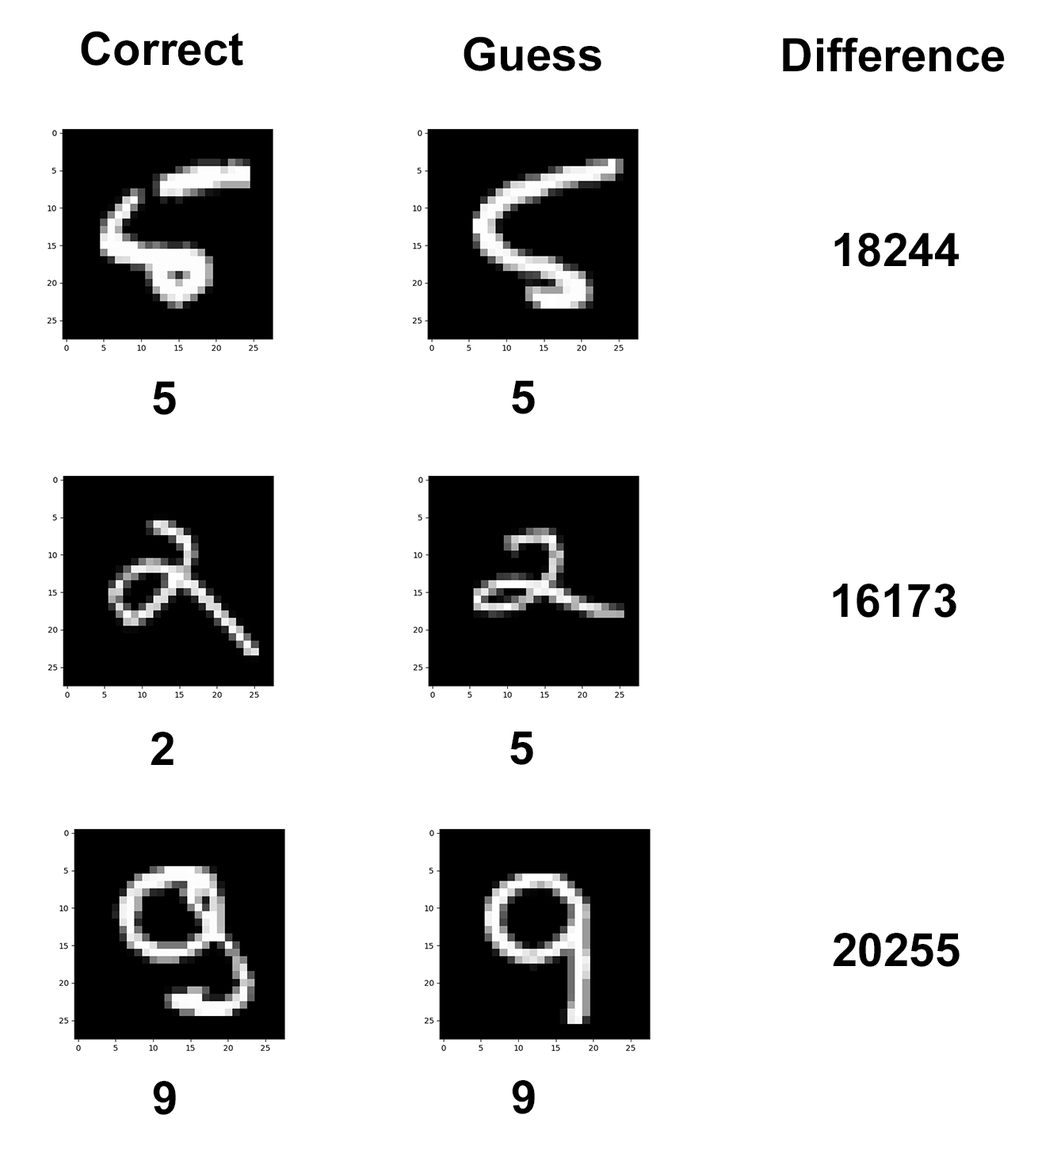
<style>
.page{position:relative;width:1038px;height:1149px;background:#ffffff}
.page>*{position:absolute;margin:0}
.t1{font:79.2px "Arial-BoldMT";color:#000000}
</style>
<div class="page">
<p class="t1" style="left:81px;top:31px;width:162px;height:35px">Correct</p>
<p class="t1" style="left:463px;top:36px;width:138px;height:35px">Guess</p>
<p class="t1" style="left:783px;top:37px;width:221px;height:35px">Difference</p>
<p class="t1" style="left:834px;top:233px;width:124px;height:34px">18244</p>
<p class="t1" style="left:153px;top:381px;width:23px;height:34px">5</p>
<p class="t1" style="left:512px;top:380px;width:23px;height:34px">5</p>
<p class="t1" style="left:832px;top:584px;width:124px;height:34px">16173</p>
<p class="t1" style="left:150px;top:732px;width:23px;height:33px">2</p>
<p class="t1" style="left:510px;top:731px;width:23px;height:34px">5</p>
<p class="t1" style="left:832px;top:933px;width:127px;height:34px">20255</p>
<p class="t1" style="left:153px;top:1081px;width:23px;height:34px">9</p>
<p class="t1" style="left:512px;top:1080px;width:23px;height:34px">9</p>
</div>
